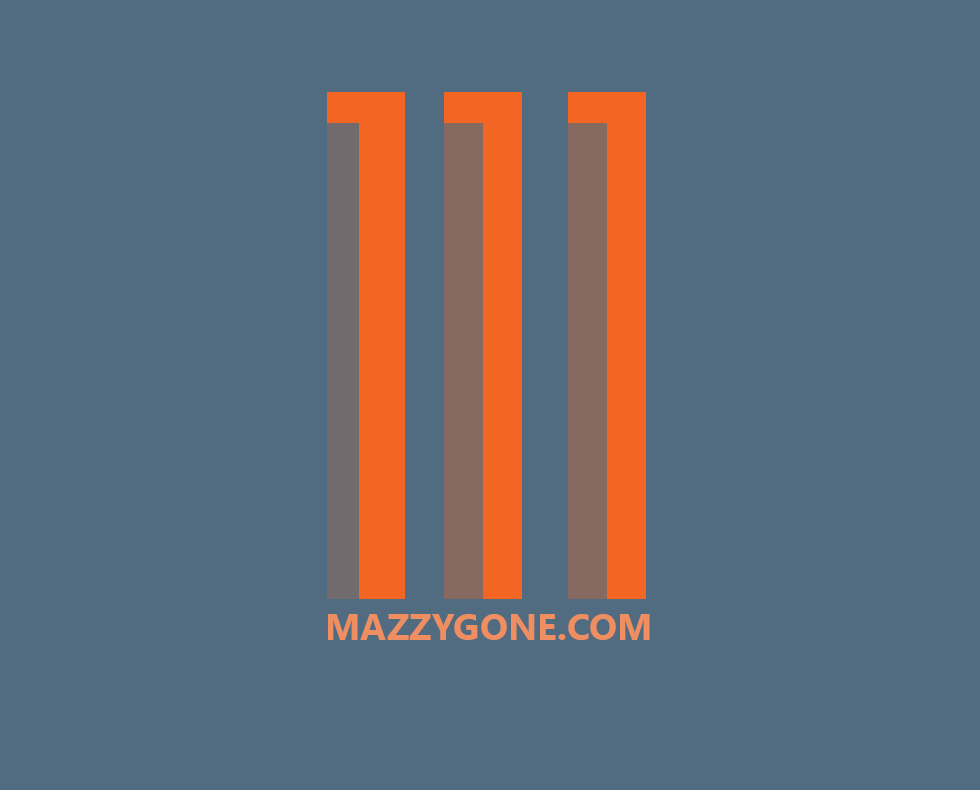
<style>
.page{position:relative;width:980px;height:790px;background:#516c80}
.page>*{position:absolute;margin:0}
.t1{font:37px "Gadugi-Bold";color:#ee8e61}
</style>
<div class="page">
<p class="t1" style="left:328px;top:614px;width:322px;height:26px">MAZZYGONE.COM</p>
</div>
